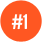
<style>
.page{position:relative;width:42px;height:42px;background:#ff5722}
.page>*{position:absolute;margin:0}
.t1{font:20px "LeagueGothic-Regular";color:#ffffff}
</style>
<div class="page">
<p class="t1" style="left:11px;top:14px;width:16px;height:16px">#1</p>
</div>
